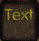
<style>
.page{position:relative;width:39px;height:41px}
.page>*{position:absolute;margin:0}
.t1{font:15.6px "18VAGRoundedMNormal"}
</style>
<div class="page">
<p class="t1" style="left:4px;top:9px;width:30px;height:12px">Text</p>
</div>
